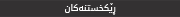
<style>
.page{position:relative;width:180px;height:17px;background:#333132}
.page>*{position:absolute;margin:0}
.t1{font:9px "DroidArabicKufi";color:#ffffff}
</style>
<div class="page">
<p class="t1" style="left:65px;top:3px;width:51px;height:12px">ڕێکخستنەکان</p>
</div>
